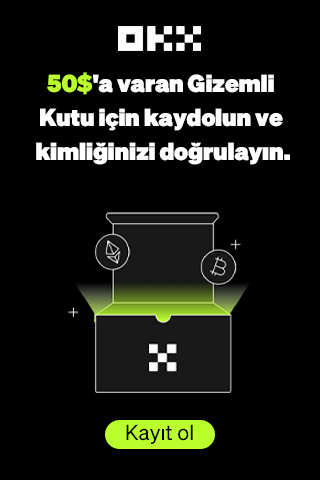
<style>
.page{position:relative;width:320px;height:480px;background:#000000}
.page>*{position:absolute;margin:0}
.t1{font:24px/34px "Sohne-Extrafett";letter-spacing:-0.01em;color:#ffffff}
.t2{font:24px/34px "Sohne-Extrafett";letter-spacing:-0.01em;color:#bcff2f}
.t3{font:21.2px "Sohne-Buch";color:#000000}
</style>
<div class="page">
<p class="t1" style="left:36px;top:72px;width:254px;height:93px;text-align:center"><span class="t2">50$</span>'a varan Gizemli <br>Kutu için kaydolun ve <br>kimliğinizi doğrulayın.</p>
<p class="t3" style="left:126px;top:424px;width:67px;height:20px">Kayıt ol</p>
</div>
